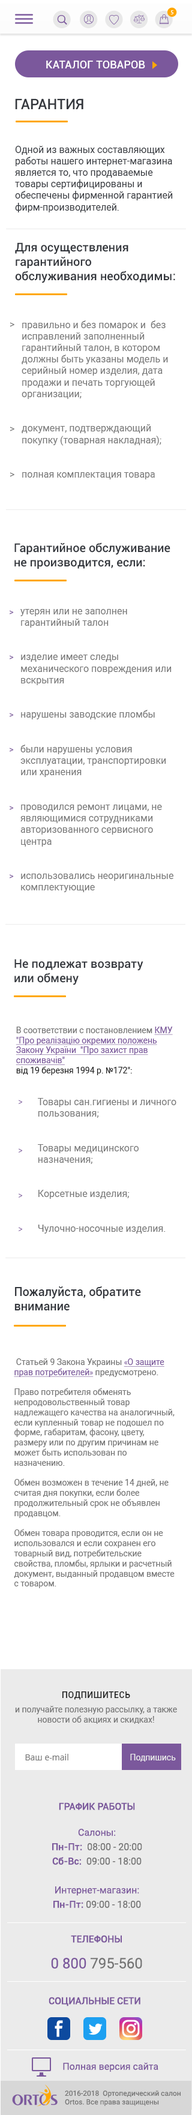
<style>
.page{position:relative;width:192px;height:2115px;background:#ffffff}
.page>*{position:absolute;margin:0}
.t1{font:6.1px "MyriadPro-Regular";letter-spacing:0.1em;color:#ffffff;text-transform:uppercase}
.t2{font:10.8px "Roboto-Medium";letter-spacing:0.01em;color:#ffffff;text-transform:uppercase}
.t3{font:14.4px "Roboto-Medium";color:#34373d;text-transform:uppercase}
.t4{font:9.6px "Roboto-Regular";color:#34373d}
.t5{font:12px "Roboto-Medium";color:#34373d}
.t6{font:9.6px "Roboto-Regular";color:#757575}
.t7{font:8.4px "Roboto-Regular";color:#7b589c}
.t8{font:8.4px "Roboto-Regular";color:#757575}
.t9{font:8.4px "Roboto-Regular";color:#7b589c;text-decoration:underline}
.t10{font:8.4px "Roboto-Regular";color:#212121}
.t11{font:8.4px "MyriadPro-Regular";color:#212121}
.t12{font:7.2px "MyriadPro-Regular";color:#7b589c}
.t13{font:8.4px "MyriadPro-Regular";color:#7b589c;text-decoration:underline}
.t14{font:8.4px/14.4px "Roboto-Regular";color:#757575}
.t15{font:8.4px "Roboto-Medium";letter-spacing:0.05em;color:#212121;text-transform:uppercase}
.t16{font:8.4px "OpenSans";color:#757575}
.t17{font:8.4px "Roboto-Regular";color:#ebebeb}
.t18{font:9.6px/14.4px "Roboto-Regular";color:#7b589c}
.t19{font:9.6px "Roboto-Medium";color:#7b589c;text-transform:uppercase}
.t20{font:9.6px/14.4px "Roboto-Medium";color:#7b589c}
.t21{font:9.6px/14.4px "Roboto-Regular";color:#757575}
.t22{font:14.4px/14.4px "Roboto-Regular";color:#7b589c}
.t23{font:14.4px/14.4px "Roboto-Regular";color:#757575}
.t24{font:9.6px "Roboto-Regular";color:#7b589c}
.t25{font:7.2px "Roboto-Regular";color:#757575}
</style>
<div class="page">
<p class="t1" style="left:170px;top:10px;width:3px;height:4px">5</p>
<p class="t2" style="left:46px;top:61px;width:99px;height:7px">Каталог товаров</p>
<p class="t3" style="left:15px;top:98px;width:68px;height:11px">Гарантия</p>
<p class="t4" style="left:15px;top:146px;width:158px;height:66px">Одной из важных составляющих работы нашего интернет-магазина является то, что продаваемые товары сертифицированы и обеспечены фирменной гарантией <br>фирм-производителей.</p>
<p class="t5" style="left:15px;top:242px;width:160px;height:41px">Для осуществления <br>гарантийного <br>обслуживания необходимы:</p>
<p class="t6" style="left:10px;top:322px;width:4px;height:5px">&gt;</p>
<p class="t6" style="left:22px;top:320px;width:146px;height:159px">правильно и без помарок и  без исправлений заполненный гарантийный талон, в котором должны быть указаны модель и серийный номер изделия, дата продажи и печать торгующей организации;<br><br><br>документ, подтверждающий покупку (товарная накладная);<br><br><br>полная комплектация товара</p>
<p class="t6" style="left:10px;top:427px;width:4px;height:4px">&gt;</p>
<p class="t6" style="left:10px;top:472px;width:4px;height:5px">&gt;</p>
<p class="t5" style="left:14px;top:542px;width:156px;height:27px">Гарантийное обслуживание<br>не производится, если:</p>
<p class="t7" style="left:10px;top:610px;width:4px;height:4px">&gt;</p>
<p class="t6" style="left:20px;top:609px;width:153px;height:283px">утерян или не заполнен гарантийный талон<br><br><br>изделие имеет следы механического повреждения или вскрытия<br><br><br>нарушены заводские пломбы<br><br><br>были нарушены условия эксплуатации, транспортировки или хранения<br><br><br>проводился ремонт лицами, не являющимися сотрудниками <br>авторизованного сервисного центра<br><br><br>использовались неоригинальные комплектующие</p>
<p class="t7" style="left:10px;top:655px;width:4px;height:4px">&gt;</p>
<p class="t7" style="left:10px;top:713px;width:4px;height:4px">&gt;</p>
<p class="t7" style="left:10px;top:748px;width:4px;height:4px">&gt;</p>
<p class="t7" style="left:10px;top:806px;width:4px;height:4px">&gt;</p>
<p class="t7" style="left:10px;top:874px;width:4px;height:4px">&gt;</p>
<p class="t5" style="left:14px;top:959px;width:129px;height:26px">Не подлежат возврату <br>или обмену</p>
<p class="t6" style="left:16px;top:1027px;width:160px;height:207px"><span class="t8"><br>В соответствии с постановлением </span><span class="t9">КМУ "Про реалізацію окремих положень Закону України  "Про захист прав споживачів" <br></span><span class="t10">від 19 березня 1994 р. </span><span class="t11">№</span><span class="t10">172":<br><br><br></span> Товары сан.гигиены и личного   пользования;<br><br><br> Товары медицинского     назначения;<br><br><br> Корсетные изделия;<br><br><br> Чулочно-носочные изделия.</p>
<p class="t12" style="left:19px;top:1100px;width:3px;height:4px">&gt;</p>
<p class="t12" style="left:19px;top:1148px;width:3px;height:5px">&gt;</p>
<p class="t12" style="left:19px;top:1193px;width:3px;height:5px">&gt;</p>
<p class="t12" style="left:19px;top:1227px;width:3px;height:4px">&gt;</p>
<p class="t8" style="left:14px;top:1286px;width:161px;height:302px"><span class="t5">Пожалуйста, обратите внимание<br><br><br></span><br> Статьей 9 Закона Украины <span class="t13">«</span><span class="t9">О защите прав потребителей</span><span class="t13">»</span> предусмотрено. <br><br>Право потребителя обменять непродовольственный товар надлежащего качества на аналогичный, если купленный товар не подошел по форме, габаритам, фасону, цвету, размеру или по другим причинам не может быть использован по назначению. <br><br>Обмен возможен в течение 14 дней, не считая дня покупки, если более продолжительный срок не объявлен продавцом. <br><br>Обмен товара проводится, если он не использовался и если сохранен его товарный вид, потребительские свойства, пломбы, ярлыки и расчетный документ, выданный продавцом вместе с товаром. <br><br>Если на момент обмена нужного товара нет в продаже, потребитель имеет право получить назад деньги.</p>
<p class="t14" style="left:15px;top:1691px;width:162px;height:33px;text-align:center"><span class="t15">Подпишитесь <br></span>и получайте полезную рассылку, а также <span class="t8">новости об акциях и скидках!</span></p>
<p class="t16" style="left:25px;top:1754px;width:43px;height:6px">Ваш e-mail</p>
<p class="t17" style="left:130px;top:1754px;width:46px;height:8px">Подпишись</p>
<p class="t18" style="left:52px;top:1802px;width:90px;height:106px;text-align:center"><span class="t19">График работы<br><br></span>Салоны: <br><span class="t20">Пн-Пт:</span><span class="t21">  08:00 - 20:00 <br></span><span class="t20">Сб-Вс:</span><span class="t21">  09:00 - 18:00<br><br></span>Интернет-магазин:<br><span class="t20">Пн-Пт:</span><span class="t21"> 09:00 - 18:00</span></p>
<p class="t19" style="left:51px;top:1935px;width:91px;height:34px;text-align:center">Телефоны<br><br><span class="t22">0 800 </span><span class="t23">795-560</span></p>
<p class="t19" style="left:49px;top:1997px;width:91px;height:9px">Социальные сети</p>
<p class="t24" style="left:63px;top:2062px;width:95px;height:10px">Полная версия сайта</p>
<p class="t25" style="left:65px;top:2090px;width:116px;height:16px">2016-2018  Ортопедический салон Ortos. Все права защищены</p>
</div>
